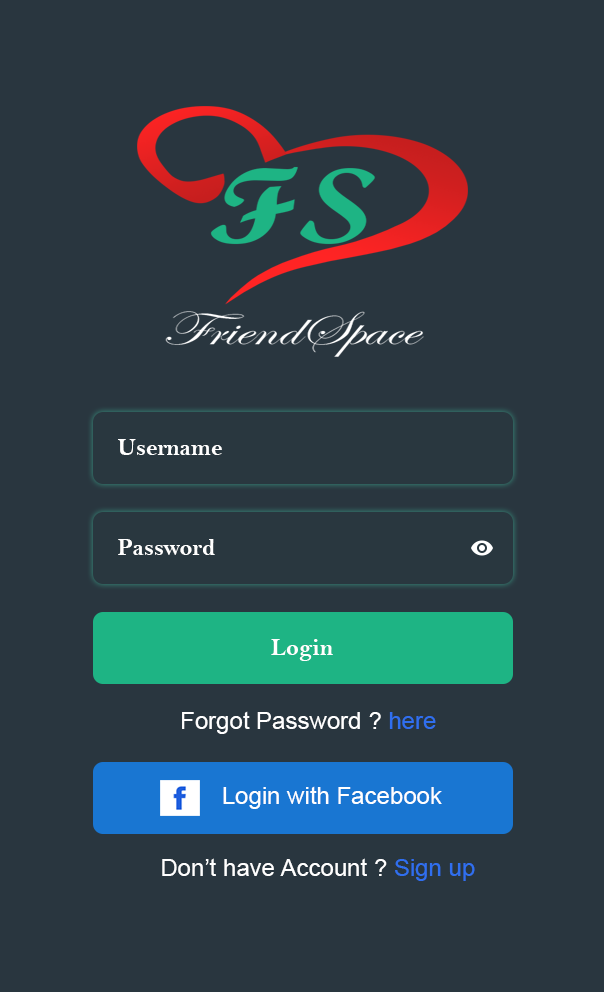
<style>
.page{position:relative;width:604px;height:992px;background:#29363f}
.page>*{position:absolute;margin:0}
.t1{font:24px "BellMTBold";color:#ffffff}
.t2{font:24px "ArialMT";color:#ffffff}
.t3{font:24px "ArialMT";color:#306fef}
</style>
<div class="page">
<p class="t1" style="left:118px;top:439px;width:104px;height:16px">Username</p>
<p class="t1" style="left:118px;top:539px;width:97px;height:16px">Password</p>
<p class="t1" style="left:271px;top:639px;width:62px;height:22px">Login</p>
<p class="t2" style="left:182px;top:711px;width:254px;height:23px">Forgot Password ? <span class="t3">here</span></p>
<p class="t2" style="left:223px;top:786px;width:219px;height:23px">Login with Facebook</p>
<p class="t2" style="left:162px;top:858px;width:313px;height:23px">Don’t have Account ? <span class="t3">Sign up</span></p>
</div>
